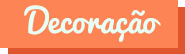
<style>
.page{position:relative;width:185px;height:54px;background:#fd8555}
.page>*{position:absolute;margin:0}
.t1{font:33.3px "Pacifico-Regular";color:#e6fef4}
</style>
<div class="page">
<p class="t1" style="left:24px;top:5px;width:137px;height:37px">Decoração</p>
</div>
